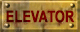
<style>
.page{position:relative;width:80px;height:32px}
.page>*{position:absolute;margin:0}
.t1{font:16px "Arial-BoldMT";color:#730000;font-weight:bold;scale:0.78 1}
</style>
<div class="page">
<p class="t1" style="left:6px;top:10px;width:69px;height:13px">ELEVATOR</p>
</div>
